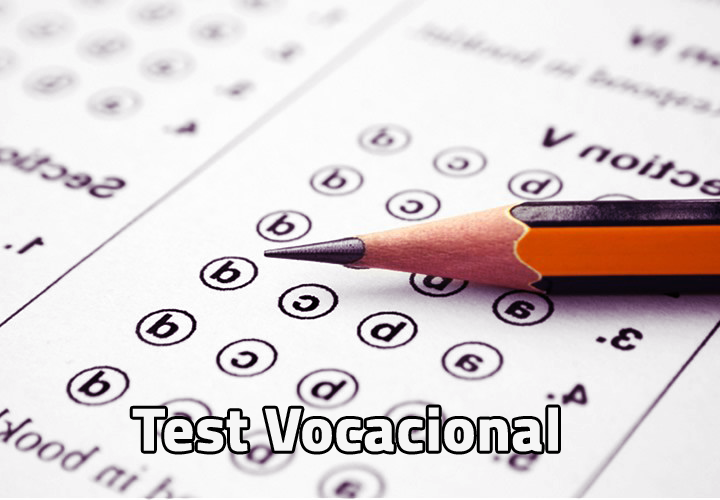
<style>
.page{position:relative;width:720px;height:500px}
.page>*{position:absolute;margin:0}
.t1{font:60.8px "TitilliumWeb-Bold";color:#f6f6f6;font-weight:bold}
</style>
<div class="page">
<p class="t1" style="left:132px;top:407px;width:426px;height:45px">Test Vocacional</p>
</div>
